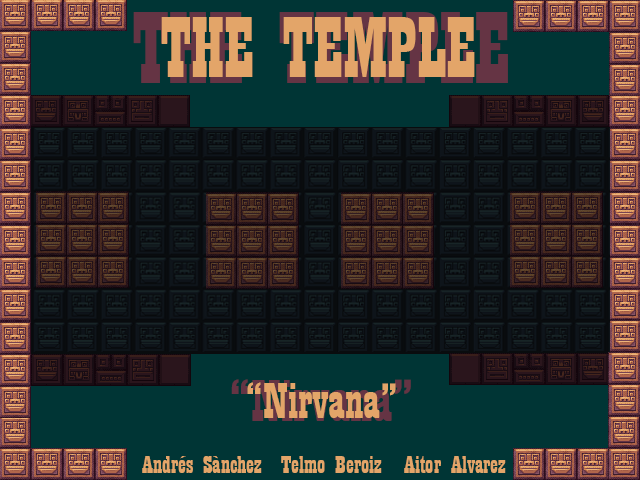
<style>
.page{position:relative;width:640px;height:480px;background:#003535}
.page>*{position:absolute;margin:0}
.t1{font:107.4px "Playbill";scale:1.07 1}
.t2{font:89.5px "Playbill";color:#e3a569;scale:1.07 1}
.t3{font:62px "Playbill";scale:1.28 1}
.t4{font:51.7px "Playbill";color:#e3a569;scale:1.28 1}
.t5{font:25.8px "Playbill";color:#e3a569;scale:1.28 1}
</style>
<div class="page">
<p class="t1" style="left:133px;top:12px;width:375px;height:71px">THE TEMPLE</p>
<p class="t2" style="left:161px;top:17px;width:314px;height:60px">THE TEMPLE</p>
<p class="t3" style="left:231px;top:379px;width:180px;height:42px">“Nirvana”</p>
<p class="t4" style="left:247px;top:382px;width:149px;height:36px">“Nirvana”</p>
<p class="t5" style="left:142px;top:456px;width:120px;height:17px">Andrés Sànchez</p>
<p class="t5" style="left:281px;top:456px;width:101px;height:17px">Telmo Beroiz</p>
<p class="t5" style="left:404px;top:456px;width:102px;height:17px">Aitor Alvarez</p>
</div>
